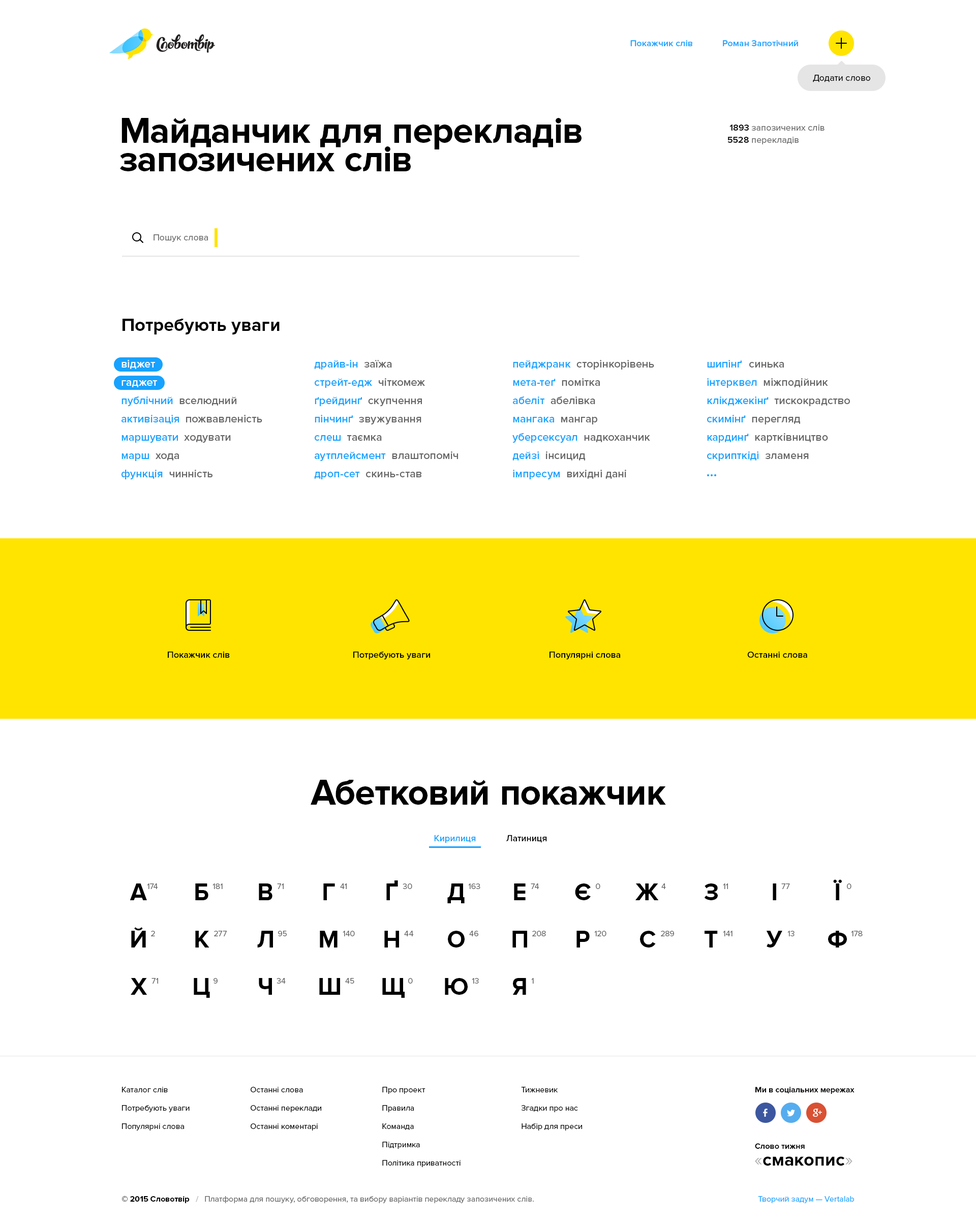
<style>
.page{position:relative;width:976px;height:1222px;background:#ffffff}
.page>*{position:absolute;margin:0}
.t1{font:9.1px "ProximaNova-Semibold";color:#17a2ff}
.t2{font:9.2px "ProximaNova-Regular";color:#000000}
.t3{font:36.6px/28.5px "ProximaNova-Bold";color:#000000}
.t4{font:9.1px "ProximaNova-Regular";color:#666666}
.t5{font:9.1px "ProximaNova-Semibold";color:#000000}
.t6{font:18.3px "ProximaNova-Bold";color:#000000}
.t7{font:11.2px/18.3px "ProximaNova-Semibold";color:#ffffff}
.t8{font:11.2px/18.3px "ProximaNova-Semibold";color:#17a2ff}
.t9{font:11.2px/18.3px "ProximaNova-Semibold";color:#666666}
.t10{font:36.6px "ProximaNova-Bold";color:#000000}
.t11{font:24.4px "ProximaNova-Bold";color:#000000}
.t12{font:8.1px "ProximaNova-Regular";color:#666666}
.t13{font:8.1px/18.3px "ProximaNova-Regular";color:#000000}
.t14{font:8.1px/18.3px "ProximaNova-Regular";color:#010101}
.t15{font:8.1px "ProximaNova-Bold";color:#010101}
.t16{font:18.3px "ProximaNova-Regular";color:#b3b3b3}
.t17{font:8.1px "ProximaNova-Bold";color:#000000}
.t18{font:8.1px "ProximaNova-Bold";color:#bfbfbf}
.t19{font:8.1px "ProximaNova-Regular";color:#17a2ff}
</style>
<div class="page">
<p class="t1" style="left:630px;top:40px;width:62px;height:6px">Покажчик слів</p>
<p class="t1" style="left:723px;top:40px;width:75px;height:6px">Роман Запотічний</p>
<p class="t2" style="left:813px;top:75px;width:57px;height:7px">Додати слово</p>
<p class="t3" style="left:120px;top:118px;width:461px;height:53px">Майданчик для перекладів<br>запозичених слів</p>
<p class="t4" style="left:729px;top:125px;width:95px;height:6px"><span class="t5">1893</span> запозичених слів</p>
<p class="t4" style="left:727px;top:137px;width:72px;height:7px"><span class="t5">5528</span> перекладів</p>
<p class="t4" style="left:153px;top:234px;width:55px;height:8px">Пошук слова</p>
<p class="t6" style="left:122px;top:319px;width:158px;height:15px">Потребують уваги</p>
<p class="t7" style="left:121px;top:360px;width:141px;height:119px">віджет<br>гаджет<br><span class="t8">публічний  </span><span class="t9">вселюдний<br></span><span class="t8">активізація  </span><span class="t9">пожвавленість<br></span><span class="t8">маршувати  </span><span class="t9">ходувати<br></span><span class="t8">марш  </span><span class="t9">хода<br></span><span class="t8">функція  </span><span class="t9">чинність</span></p>
<p class="t8" style="left:314px;top:360px;width:144px;height:119px">драйв-ін  <span class="t9">заїжа<br></span>стрейт-едж  <span class="t9">чіткомеж<br></span>ґрейдинґ  <span class="t9">скупчення<br></span>пінчинґ  <span class="t9">звужування<br></span>слеш  <span class="t9">таємка<br></span>аутплейсмент  <span class="t9">влаштопоміч<br></span>дроп-сет  <span class="t9">скинь-став</span></p>
<p class="t9" style="left:512px;top:360px;width:142px;height:119px"><span class="t8">пейджранк  </span>сторінкорівень<br><span class="t8">мета-теґ  </span>помітка<br><span class="t8">абеліт  </span>абелівка<br><span class="t8">мангака  </span>мангар<br><span class="t8">уберсексуал  </span>надкоханчик<br><span class="t8">дейзі  </span>інсицид<br><span class="t8">імпресум  </span>вихідні дані</p>
<p class="t9" style="left:707px;top:360px;width:143px;height:101px"><span class="t8">шипінґ   </span>синька<br><span class="t8">інтерквел  </span>міжподійник<br><span class="t8">клікджекінґ  </span>тискокрадство<br><span class="t8">скимінґ  </span>перегляд<br><span class="t8">кардинґ  </span>картківництво<br><span class="t8">скрипткіді  </span>зламеня</p>
<p class="t5" style="left:168px;top:651px;width:62px;height:7px">Покажчик слів</p>
<p class="t5" style="left:353px;top:651px;width:77px;height:9px">Потребують уваги</p>
<p class="t5" style="left:549px;top:651px;width:71px;height:9px">Популярні слова</p>
<p class="t5" style="left:747px;top:651px;width:60px;height:7px">Останні слова</p>
<p class="t10" style="left:311px;top:780px;width:355px;height:25px">Абетковий покажчик</p>
<p class="t1" style="left:434px;top:835px;width:42px;height:8px">Кирилиця</p>
<p class="t5" style="left:506px;top:835px;width:41px;height:8px">Латиниця</p>
<p class="t11" style="left:386px;top:880px;width:12px;height:20px">Ґ</p>
<p class="t11" style="left:833px;top:879px;width:9px;height:21px">Ї</p>
<p class="t11" style="left:130px;top:883px;width:17px;height:17px">А</p>
<p class="t12" style="left:147px;top:883px;width:11px;height:6px">174</p>
<p class="t11" style="left:195px;top:883px;width:13px;height:17px">Б</p>
<p class="t12" style="left:212px;top:883px;width:11px;height:6px">181</p>
<p class="t11" style="left:259px;top:883px;width:13px;height:17px">В</p>
<p class="t12" style="left:277px;top:883px;width:7px;height:6px">71</p>
<p class="t11" style="left:323px;top:883px;width:12px;height:17px">Г</p>
<p class="t12" style="left:340px;top:883px;width:7px;height:6px">41</p>
<p class="t12" style="left:403px;top:883px;width:9px;height:6px">30</p>
<p class="t11" style="left:447px;top:883px;width:18px;height:20px">Д</p>
<p class="t12" style="left:468px;top:883px;width:12px;height:6px">163</p>
<p class="t11" style="left:514px;top:883px;width:12px;height:17px">Е</p>
<p class="t12" style="left:531px;top:883px;width:8px;height:6px">74</p>
<p class="t11" style="left:575px;top:883px;width:16px;height:17px">Є</p>
<p class="t12" style="left:596px;top:883px;width:4px;height:6px">0</p>
<p class="t11" style="left:635px;top:883px;width:24px;height:17px">Ж</p>
<p class="t12" style="left:661px;top:883px;width:5px;height:6px">4</p>
<p class="t11" style="left:704px;top:883px;width:14px;height:17px">З</p>
<p class="t12" style="left:723px;top:883px;width:5px;height:6px">11</p>
<p class="t11" style="left:773px;top:883px;width:3px;height:17px">І</p>
<p class="t12" style="left:781px;top:883px;width:9px;height:6px">77</p>
<p class="t12" style="left:847px;top:883px;width:4px;height:6px">0</p>
<p class="t11" style="left:131px;top:927px;width:15px;height:20px">Й</p>
<p class="t12" style="left:151px;top:931px;width:4px;height:5px">2</p>
<p class="t11" style="left:195px;top:931px;width:14px;height:16px">К</p>
<p class="t12" style="left:214px;top:931px;width:13px;height:5px">277</p>
<p class="t11" style="left:257px;top:931px;width:16px;height:16px">Л</p>
<p class="t12" style="left:278px;top:931px;width:9px;height:5px">95</p>
<p class="t11" style="left:320px;top:931px;width:17px;height:16px">М</p>
<p class="t12" style="left:343px;top:931px;width:12px;height:5px">140</p>
<p class="t11" style="left:384px;top:931px;width:15px;height:16px">Н</p>
<p class="t12" style="left:404px;top:931px;width:10px;height:5px">44</p>
<p class="t11" style="left:448px;top:931px;width:17px;height:16px">О</p>
<p class="t12" style="left:469px;top:931px;width:9px;height:5px">46</p>
<p class="t11" style="left:512px;top:931px;width:15px;height:16px">П</p>
<p class="t12" style="left:532px;top:931px;width:14px;height:5px">208</p>
<p class="t11" style="left:576px;top:931px;width:14px;height:16px">Р</p>
<p class="t12" style="left:594px;top:931px;width:12px;height:5px">120</p>
<p class="t11" style="left:640px;top:931px;width:16px;height:16px">С</p>
<p class="t12" style="left:661px;top:931px;width:13px;height:5px">289</p>
<p class="t11" style="left:704px;top:931px;width:14px;height:16px">Т</p>
<p class="t12" style="left:723px;top:931px;width:9px;height:5px">141</p>
<p class="t11" style="left:766px;top:931px;width:16px;height:16px">У</p>
<p class="t12" style="left:787px;top:931px;width:7px;height:5px">13</p>
<p class="t11" style="left:828px;top:931px;width:19px;height:16px">Ф</p>
<p class="t12" style="left:851px;top:931px;width:12px;height:5px">178</p>
<p class="t11" style="left:131px;top:978px;width:16px;height:17px">Х</p>
<p class="t12" style="left:151px;top:978px;width:7px;height:6px">71</p>
<p class="t11" style="left:194px;top:978px;width:16px;height:20px">Ц</p>
<p class="t12" style="left:213px;top:978px;width:5px;height:6px">9</p>
<p class="t11" style="left:259px;top:978px;width:13px;height:17px">Ч</p>
<p class="t12" style="left:277px;top:978px;width:9px;height:6px">34</p>
<p class="t11" style="left:319px;top:978px;width:21px;height:17px">Ш</p>
<p class="t12" style="left:345px;top:978px;width:9px;height:6px">45</p>
<p class="t11" style="left:382px;top:978px;width:23px;height:20px">Щ</p>
<p class="t12" style="left:408px;top:978px;width:5px;height:6px">0</p>
<p class="t11" style="left:445px;top:978px;width:23px;height:17px">Ю</p>
<p class="t12" style="left:472px;top:978px;width:7px;height:6px">13</p>
<p class="t11" style="left:512px;top:978px;width:14px;height:17px">Я</p>
<p class="t12" style="left:531px;top:978px;width:3px;height:6px">1</p>
<p class="t13" style="left:122px;top:1087px;width:68px;height:43px">Каталог слів<br>Потребують уваги<br>Популярні слова</p>
<p class="t13" style="left:251px;top:1087px;width:70px;height:43px">Останні слова<br>Останні переклади<br>Останні коментарі</p>
<p class="t13" style="left:382px;top:1087px;width:78px;height:80px">Про проект<br>Правила<br>Команда<br>Підтримка<br>Політика приватності</p>
<p class="t14" style="left:521px;top:1087px;width:61px;height:43px">Тижневик<br>Згадки про нас<br>Набір для преси</p>
<p class="t15" style="left:755px;top:1087px;width:99px;height:7px">Ми в соціальних мережах</p>
<p class="t15" style="left:755px;top:1143px;width:50px;height:6px">Слово тижня</p>
<p class="t6" style="left:755px;top:1156px;width:97px;height:10px"><span class="t16">«</span>смакопис<span class="t16">»</span></p>
<p class="t12" style="left:122px;top:1196px;width:412px;height:7px"><span class="t17">© 2015 Словотвір   </span><span class="t18">/   </span>Платформа для пошуку, обговорення, та вибору варіантів перекладу запозичених слів.</p>
<p class="t19" style="left:758px;top:1196px;width:96px;height:7px">Творчий задум — Vertalab</p>
</div>
